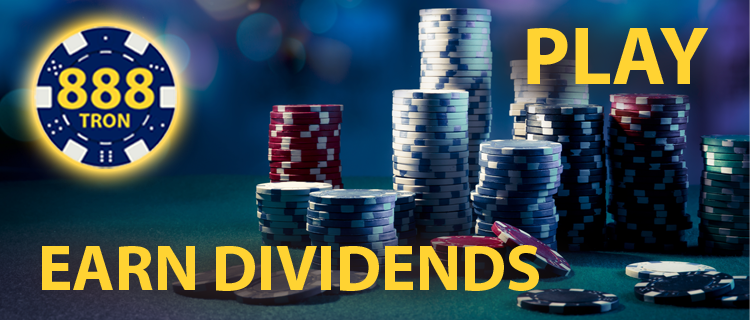
<style>
.page{position:relative;width:750px;height:320px}
.page>*{position:absolute;margin:0}
.t1{font:82.4px "MyriadPro-Bold";color:#ffd332}
.t2{font:65.2px "MyriadPro-Bold";color:#ffd332}
</style>
<div class="page">
<p class="t1" style="left:527px;top:28px;width:182px;height:56px">PLAY</p>
<p class="t2" style="left:42px;top:245px;width:497px;height:46px">EARN DIVIDENDS</p>
</div>
